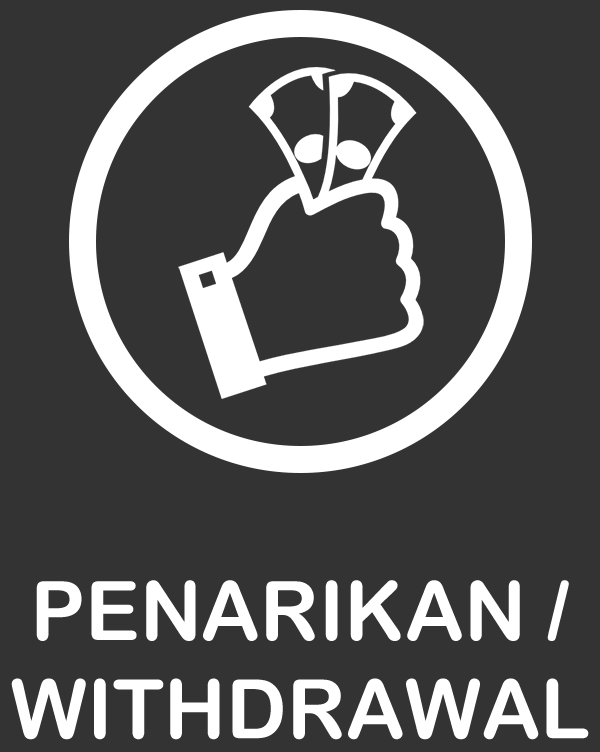
<style>
.page{position:relative;width:600px;height:752px;background:#333333}
.page>*{position:absolute;margin:0}
.t1{font:81.9px "ArialRoundedMTBold";color:#ffffff}
</style>
<div class="page">
<p class="t1" style="left:11px;top:580px;width:578px;height:160px;text-align:center">PENARIKAN /<br>WITHDRAWAL</p>
</div>
